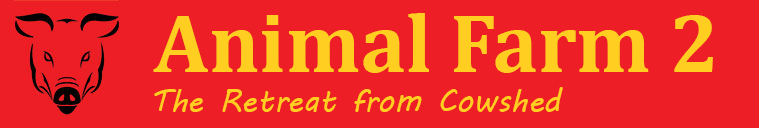
<style>
.page{position:relative;width:759px;height:128px;background:#ed1e26}
.page>*{position:absolute;margin:0}
.t1{font:84px "Cambria-Bold";color:#ffce21}
.t2{font:32px "MVBoli";color:#ffce21}
</style>
<div class="page">
<p class="t1" style="left:153px;top:13px;width:560px;height:60px">Animal Farm 2</p>
<p class="t2" style="left:154px;top:87px;width:409px;height:25px">The Retreat from Cowshed</p>
</div>
